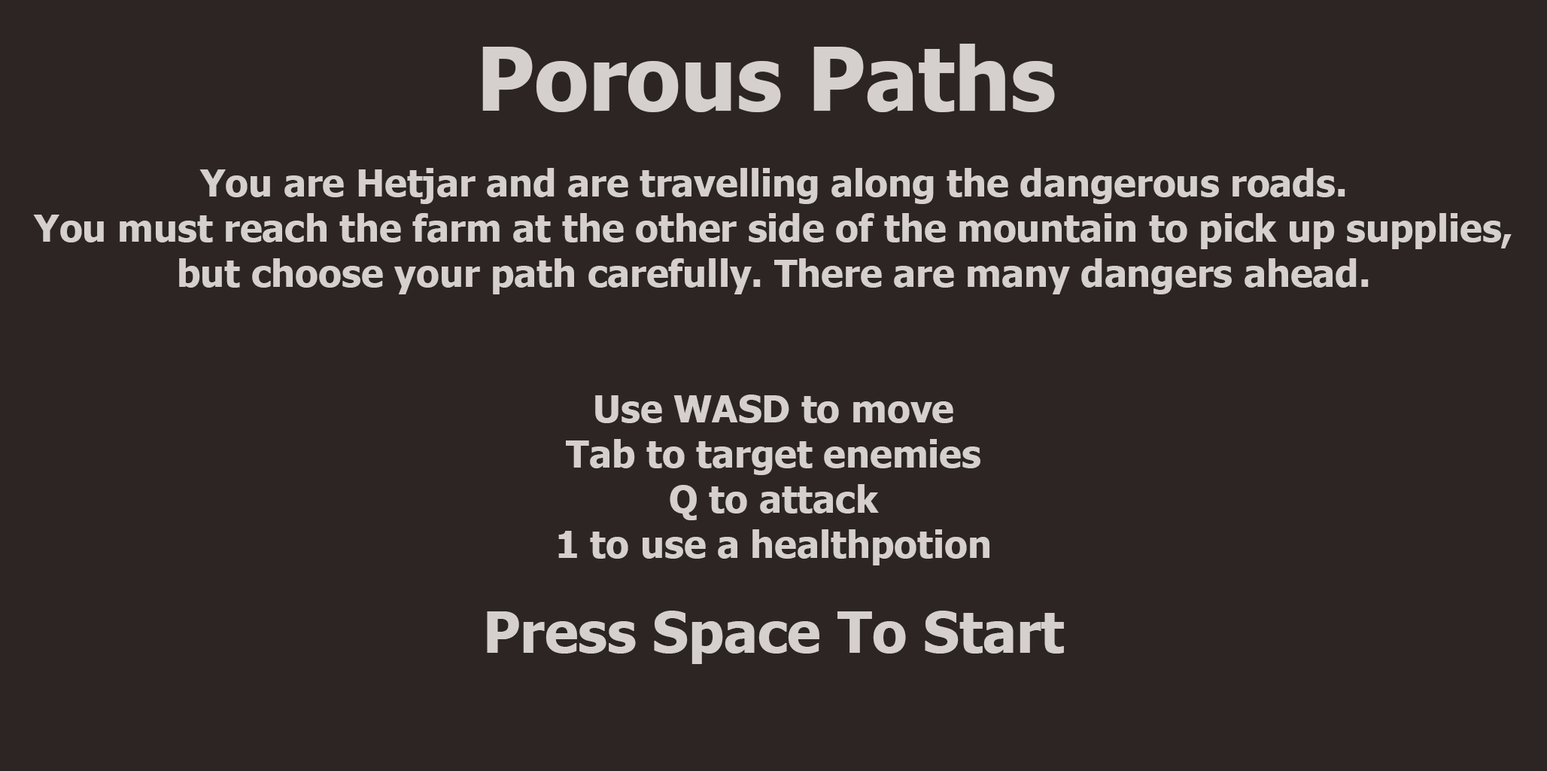
<style>
.page{position:relative;width:1547px;height:771px;background:#2c2524}
.page>*{position:absolute;margin:0}
.t1{font:87.8px "Tahoma-Bold";color:#d5cfcd}
.t2{font:37.6px "Tahoma-Bold";color:#d5cfcd}
.t3{font:56.4px "Tahoma-Bold";color:#d5cfcd}
</style>
<div class="page">
<p class="t1" style="left:482px;top:44px;width:573px;height:68px">Porous Paths</p>
<p class="t2" style="left:33px;top:168px;width:1479px;height:397px;text-align:center">You are Hetjar and are travelling along the dangerous roads. <br>You must reach the farm at the other side of the mountain to pick up supplies, but choose your path carefully. There are many dangers ahead.<br><br><br>Use WASD to move<br>Tab to target enemies<br>Q to attack<br>1 to use a healthpotion</p>
<p class="t3" style="left:487px;top:610px;width:577px;height:54px">Press Space To Start</p>
</div>
